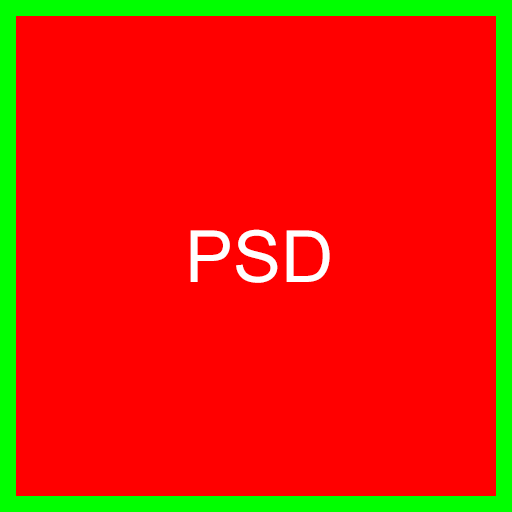
<style>
.page{position:relative;width:512px;height:512px;background:#ff0000}
.page>*{position:absolute;margin:0}
.t1{font:72px "ArialMT";color:#ffffff}
</style>
<div class="page">
<p class="t1" style="left:190px;top:229px;width:140px;height:54px">PSD</p>
</div>
